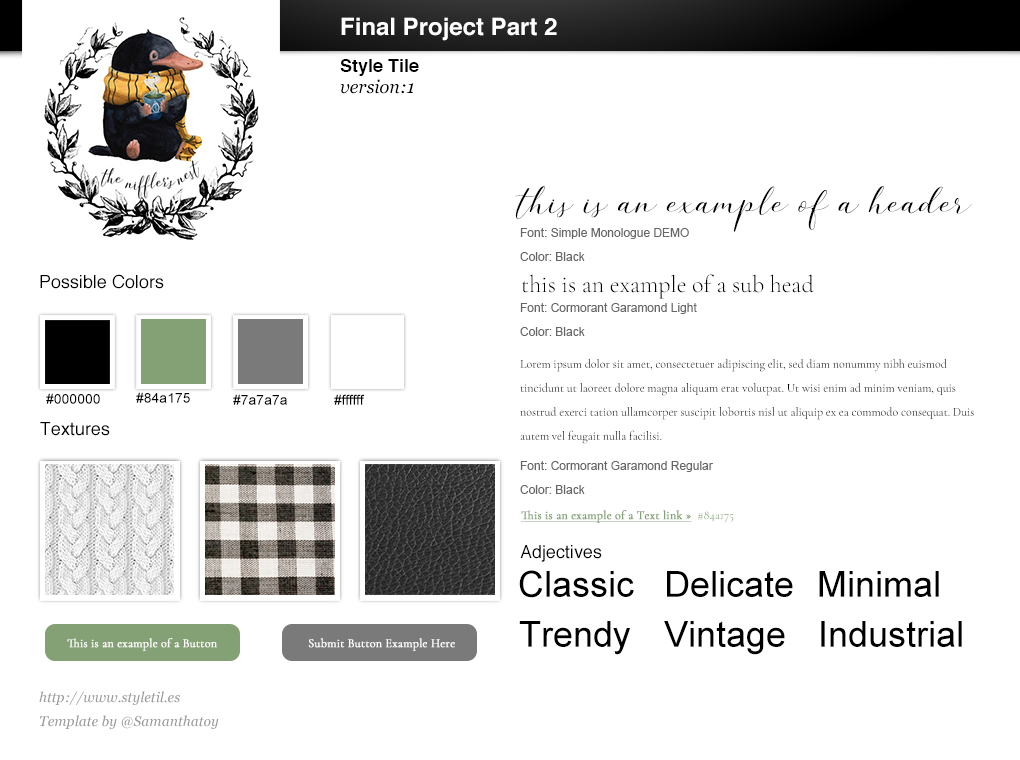
<style>
.page{position:relative;width:1020px;height:760px;background:#ffffff}
.page>*{position:absolute;margin:0}
.t1{font:24px "Helvetica-Bold";color:#ffffff}
.t2{font:18px "Helvetica-Bold";color:#000000}
.t3{font:18px "Georgia-Italic";color:#000000}
.t4{font:48px "SimpleMonologueDEMO-Regular";color:#000000}
.t5{font:12px/24px "ArialMT";color:#666666}
.t6{font:18px "Helvetica";color:#000000}
.t7{font:24px "CormorantGaramond-Light";color:#000000}
.t8{font:12px/24px "CormorantGaramond-Regular";color:#000000}
.t9{font:14px "ArialMT";color:#000000}
.t10{font:12px "CormorantGaramond-Regular";color:#84a175;font-weight:bold;text-decoration:underline}
.t11{font:12px "CormorantGaramond-Regular";color:#84a175}
.t12{font:36px "ArialMT";color:#000000}
.t13{font:12px "CormorantGaramond-Regular";color:#ffffff;font-weight:bold}
.t14{font:14px/24px "Georgia-Italic";color:#999999}
</style>
<div class="page">
<p class="t1" style="left:341px;top:17px;width:216px;height:24px">Final Project Part 2</p>
<p class="t2" style="left:340px;top:59px;width:79px;height:17px">Style Tile</p>
<p class="t3" style="left:340px;top:79px;width:74px;height:15px">version:1</p>
<p class="t4" style="left:515px;top:186px;width:457px;height:46px">this is an example of a header</p>
<p class="t5" style="left:520px;top:228px;width:169px;height:33px">Font: Simple Monologue DEMO <br>Color: Black</p>
<p class="t6" style="left:40px;top:274px;width:124px;height:15px">Possible Colors</p>
<p class="t7" style="left:522px;top:274px;width:292px;height:25px">this is an example of a sub head</p>
<p class="t5" style="left:520px;top:303px;width:177px;height:33px">Font: Cormorant Garamond Light <br>Color: Black</p>
<p class="t8" style="left:520px;top:358px;width:454px;height:86px">Lorem ipsum dolor sit amet, consectetuer adipiscing elit, sed diam nonummy nibh euismod tincidunt ut laoreet dolore magna aliquam erat volutpat. Ut wisi enim ad minim veniam, quis nostrud exerci tation ullamcorper suscipit lobortis nisl ut aliquip ex ea commodo consequat. Duis autem vel feugait nulla facilisi.</p>
<p class="t9" style="left:46px;top:393px;width:54px;height:11px">#000000</p>
<p class="t9" style="left:136px;top:392px;width:54px;height:11px">#84a175</p>
<p class="t9" style="left:233px;top:394px;width:54px;height:11px">#7a7a7a</p>
<p class="t9" style="left:334px;top:394px;width:31px;height:11px">#ffffff</p>
<p class="t6" style="left:40px;top:422px;width:70px;height:14px">Textures</p>
<p class="t5" style="left:520px;top:461px;width:193px;height:33px">Font: Cormorant Garamond Regular <br>Color: Black</p>
<p class="t10" style="left:521px;top:510px;width:213px;height:13px">This is an example of a Text link » <span class="t11"> #84a175</span></p>
<p class="t6" style="left:520px;top:545px;width:82px;height:17px">Adjectives</p>
<p class="t12" style="left:519px;top:570px;width:115px;height:28px">Classic</p>
<p class="t12" style="left:667px;top:571px;width:126px;height:26px">Delicate</p>
<p class="t12" style="left:819px;top:571px;width:120px;height:26px">Minimal</p>
<p class="t12" style="left:519px;top:621px;width:112px;height:34px">Trendy</p>
<p class="t12" style="left:664px;top:621px;width:121px;height:34px">Vintage</p>
<p class="t12" style="left:821px;top:621px;width:141px;height:26px">Industrial</p>
<p class="t13" style="left:67px;top:638px;width:150px;height:13px">This is an example of a Button</p>
<p class="t13" style="left:308px;top:638px;width:147px;height:13px">Submit Button Example Here</p>
<p class="t14" style="left:39px;top:691px;width:180px;height:38px">http://www.styletil.es<br>Template by @Samanthatoy</p>
</div>
